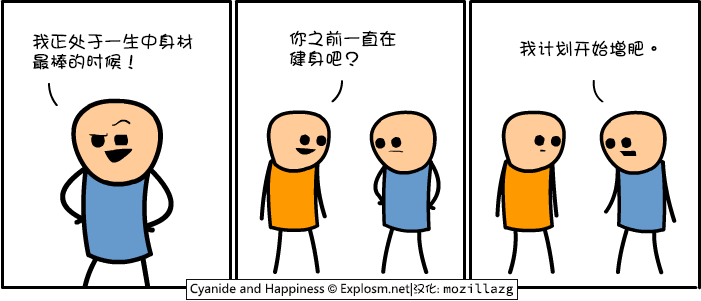
<style>
.page{position:relative;width:701px;height:301px;background:#ffffff}
.page>*{position:absolute;margin:0}
.t1{font:18px/20px "DFGirl";color:#000000}
.t2{font:18px "DFGirl";color:#000000}
</style>
<div class="page">
<p class="t1" style="left:289px;top:30px;width:107px;height:37px">你之前一直在<br>健身吧？</p>
<p class="t1" style="left:32px;top:33px;width:161px;height:37px">我正处于一生中身材<br>最棒的时候！</p>
<p class="t2" style="left:519px;top:40px;width:138px;height:17px">我计划开始增肥。</p>
</div>
